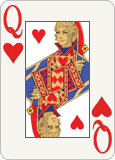
<style>
.page{position:relative;width:115px;height:160px;background:#f7f5ef}
.page>*{position:absolute;margin:0}
.t1{font:41.7px "BaskOldFace";color:#e22523;font-weight:bold;scale:0.6 1}
</style>
<div class="page">
<p class="t1" style="left:3px;top:5px;width:20px;height:34px">Q</p>
<p class="t1" style="left:92px;top:120px;width:20px;height:34px;rotate:180deg">Q</p>
</div>
